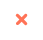
<style>
.page{position:relative;width:43px;height:40px;background:#ffffff}
.page>*{position:absolute;margin:0}
.t1{font:26px "HelveticaRoundedLT-Bold";letter-spacing:-0.04em;color:#ff7357}
</style>
<div class="page">
<p class="t1" style="left:15px;top:13px;width:13px;height:13px;rotate:45deg">+</p>
</div>
